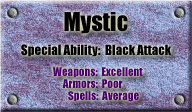
<style>
.page{position:relative;width:192px;height:112px}
.page>*{position:absolute;margin:0}
.t1{font:24px "Impact";color:#000000}
.t2{font:13px "Impact";color:#000000}
.t3{font:11px "Impact";color:#4a006c}
</style>
<div class="page">
<p class="t1" style="left:64px;top:12px;width:64px;height:22px">Mystic</p>
<p class="t2" style="left:21px;top:44px;width:150px;height:13px">Special Ability:  Black Attack</p>
<p class="t3" style="left:53px;top:67px;width:90px;height:10px">Weapons:  Excellent</p>
<p class="t3" style="left:62px;top:79px;width:61px;height:9px">Armors:  Poor</p>
<p class="t3" style="left:68px;top:91px;width:71px;height:11px">Spells:  Average</p>
</div>
